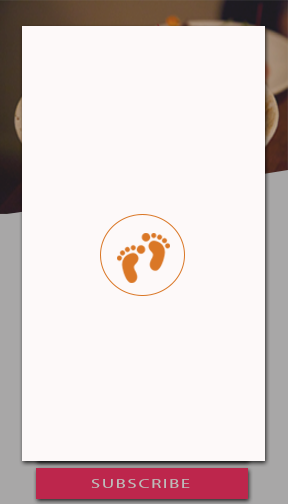
<style>
.page{position:relative;width:288px;height:504px;background:#fdf9f9}
.page>*{position:absolute;margin:0}
.t1{font:12.9px "MyriadPro-Regular";letter-spacing:0.1em;color:#bdbdbd;scale:1.43 1}
</style>
<div class="page">
<p class="t1" style="left:91px;top:479px;width:99px;height:9px">SUBSCRIBE</p>
</div>
